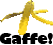
<style>
.page{position:relative;width:53px;height:45px;background:#ffffff}
.page>*{position:absolute;margin:0}
.t1{font:14.7px "GillSans-UltraBold";letter-spacing:-0.015em;color:#000000}
</style>
<div class="page">
<p class="t1" style="left:0px;top:33px;width:53px;height:11px">Gaffe!</p>
</div>
